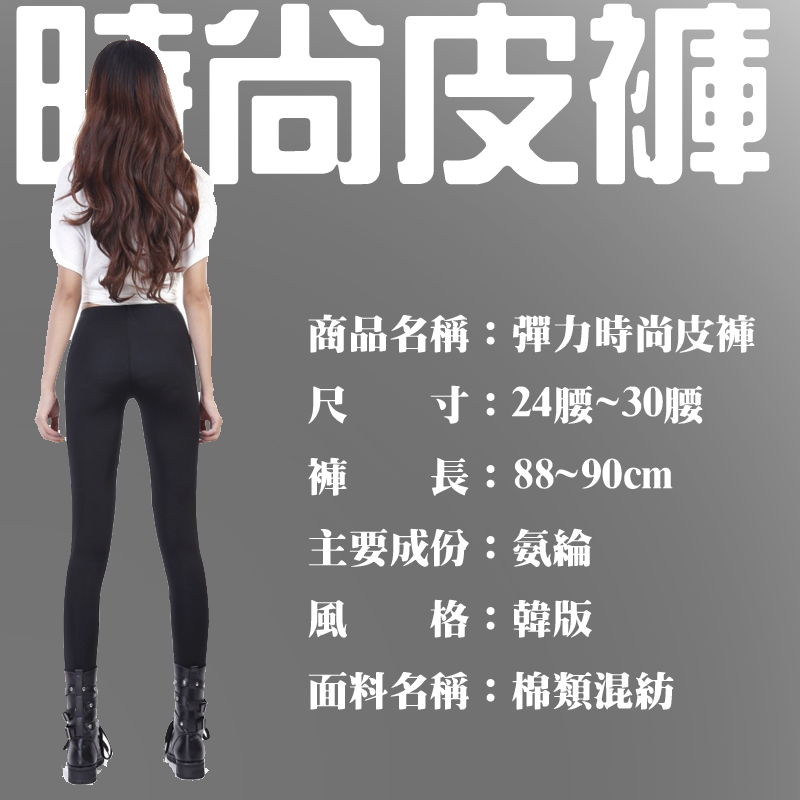
<style>
.page{position:relative;width:800px;height:800px}
.page>*{position:absolute;margin:0}
.t1{font:192.4px "HanWangZonYi";color:#ffffff}
.t2{font:40.8px "HanWangMingBlack";color:#ffffff}
</style>
<div class="page">
<p class="t1" style="left:16px;top:2px;width:754px;height:183px">時尚皮褲</p>
<p class="t2" style="left:308px;top:314px;width:447px;height:396px">商品名稱：彈力時尚皮褲<br>尺    寸：24腰~30腰<br>褲    長：88~90cm<br>主要成份：氨綸<br>風    格：韓版<br>面料名稱：棉類混紡</p>
</div>
